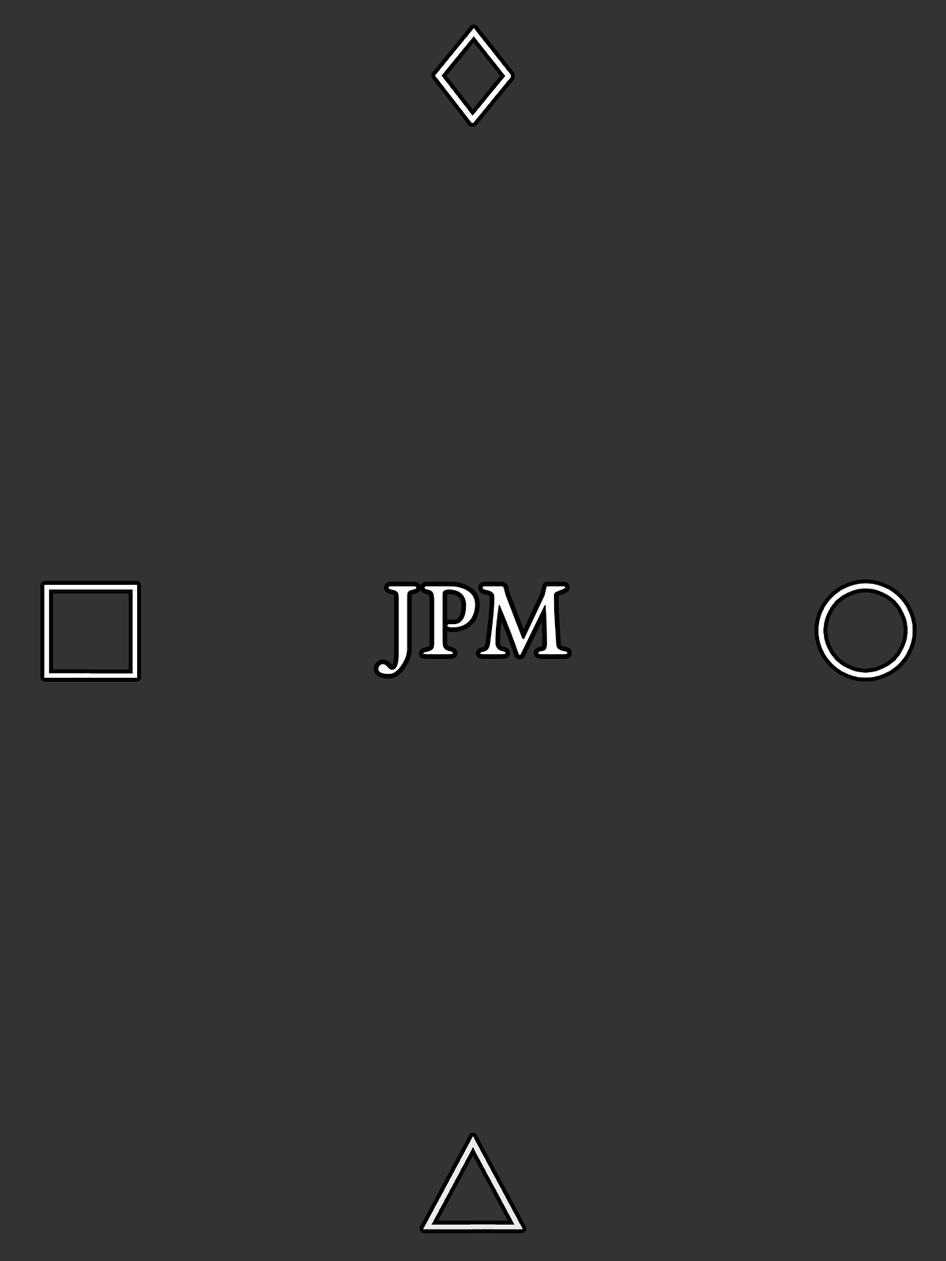
<style>
.page{position:relative;width:946px;height:1261px;background:#333333}
.page>*{position:absolute;margin:0}
.t1{font:102.4px "EBGaramond-Regular";letter-spacing:0.01em;color:#ffffff}
</style>
<div class="page">
<p class="t1" style="left:378px;top:586px;width:189px;height:88px">JPM</p>
</div>
